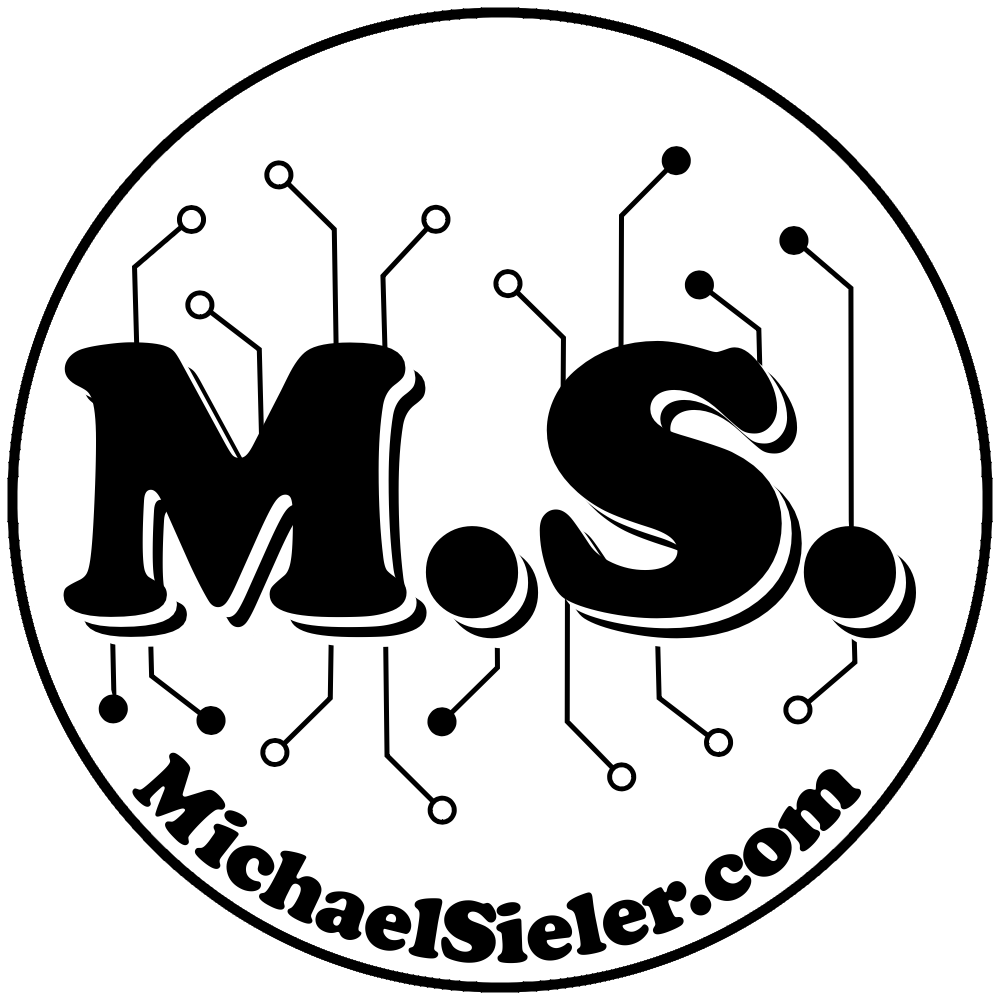
<style>
.page{position:relative;width:1000px;height:1000px;background:#ffffff}
.page>*{position:absolute;margin:0}
.t1{font:400px "CooperBlack";color:#000000}
.t2{font:90px "CooperBlack";color:#000000}
</style>
<div class="page">
<p class="t1" style="left:63px;top:340px;width:834px;height:279px">M.S.</p>
<p class="t1" style="left:73px;top:350px;width:834px;height:279px">M.S.</p>
<p class="t1" style="left:83px;top:360px;width:834px;height:279px">M.S.</p>
<p class="t1" style="left:93px;top:370px;width:834px;height:279px">M.S.</p>
<p class="t2" style="left:130px;top:752px;width:734px;height:212px;text-align:center">M ichaelSieler.com</p>
<p class="t2" style="left:131px;top:755px;width:734px;height:212px;text-align:center">M ichaelSieler.com</p>
</div>
